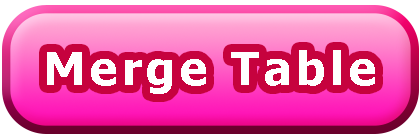
<style>
.page{position:relative;width:420px;height:135px}
.page>*{position:absolute;margin:0}
.t1{font:46.3px "Tahoma-Bold";letter-spacing:0.1em;color:#ffffff}
</style>
<div class="page">
<p class="t1" style="left:47px;top:50px;width:328px;height:44px">Merge Table</p>
</div>
